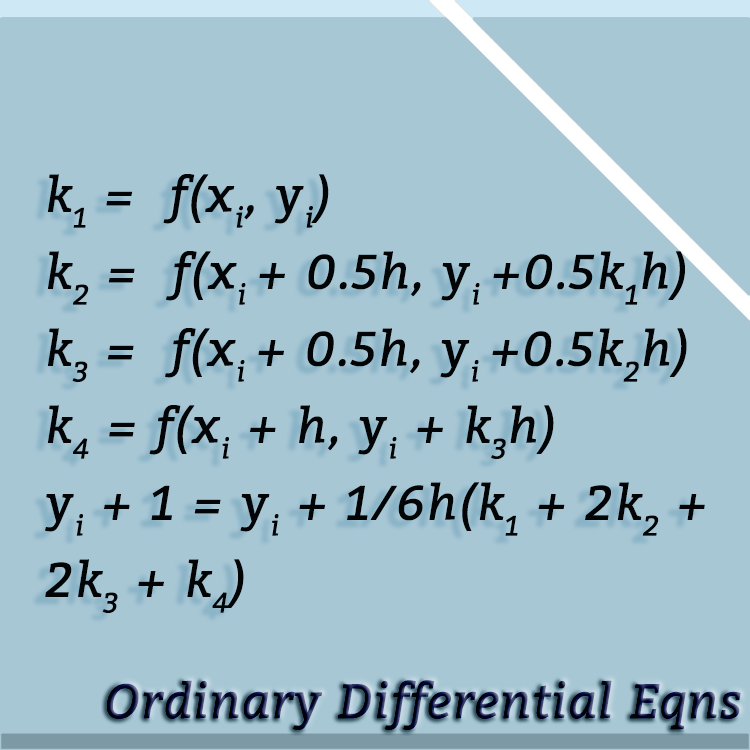
<style>
.page{position:relative;width:750px;height:750px;background:#a8c7d5}
.page>*{position:absolute;margin:0}
.t1{font:48px/77px "Bitter-Italic";letter-spacing:0.02em;color:#020405;font-weight:bold}
.t2{font:48px "Bitter-Italic";font-weight:bold}
</style>
<div class="page">
<p class="t1" style="left:45px;top:174px;width:660px;height:439px">k1 =  f(xi, yi)<br>k2 =  f(xi + 0.5h, yi +0.5k1h)<br>k3 =  f(xi + 0.5h, yi +0.5k2h)<br>k4 = f(xi + h, yi + k3h)<br>yi + 1 = yi + 1/6h(k1 + 2k2 + 2k3 + k4)</p>
<p class="t2" style="left:107px;top:680px;width:634px;height:50px">Ordinary Differential Eqns</p>
</div>
